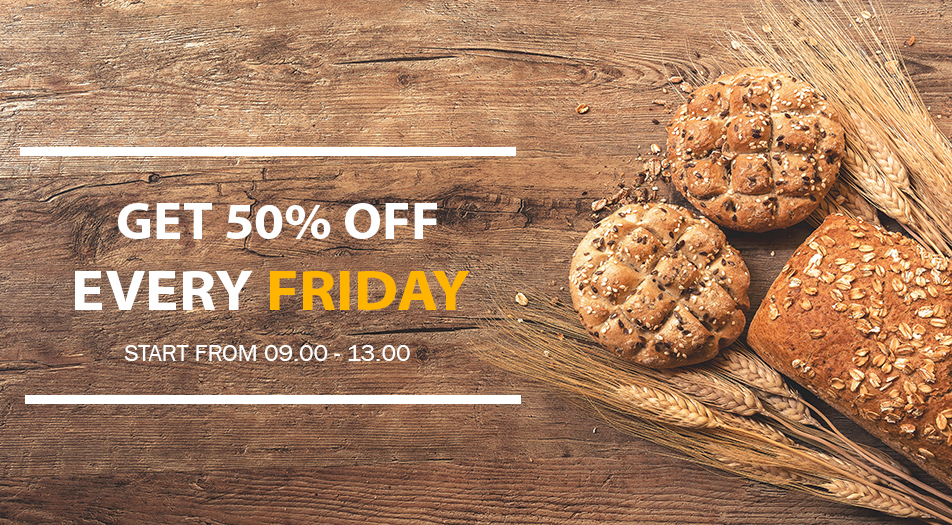
<style>
.page{position:relative;width:952px;height:525px}
.page>*{position:absolute;margin:0}
.t1{font:51.9px "MyriadHebrew-Bold";color:#fefefe;scale:1.05 1}
.t2{font:57px "MyriadHebrew-Bold";color:#ffb400;scale:1.1 1}
.t3{font:57px "MyriadHebrew-Bold";color:#fefefe;scale:1.1 1}
.t4{font:23.5px "FranklinGothic-Book";color:#ffffff;scale:1.05 1}
</style>
<div class="page">
<p class="t1" style="left:118px;top:203px;width:319px;height:36px">GET 50% OFF</p>
<p class="t2" style="left:75px;top:271px;width:395px;height:39px"><span class="t3">EVERY </span>FRIDAY</p>
<p class="t4" style="left:124px;top:345px;width:286px;height:16px">START FROM 09.00 - 13.00</p>
</div>
